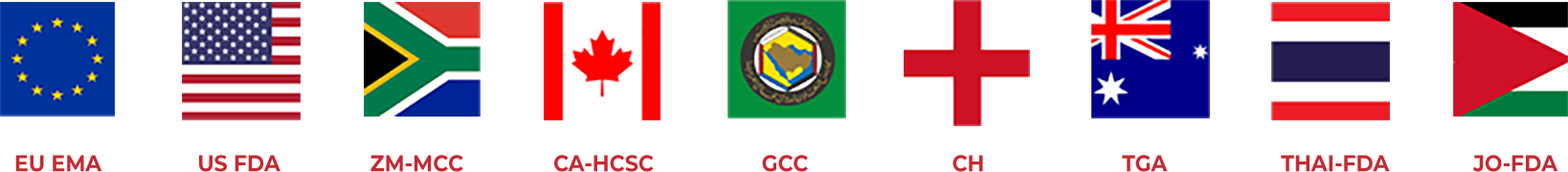
<style>
.page{position:relative;width:1568px;height:172px;background:#ffffff}
.page>*{position:absolute;margin:0}
.t1{font:23px "Montserrat-Bold";color:#c52a32;scale:0.92 1}
</style>
<div class="page">
<p class="t1" style="left:15px;top:155px;width:1543px;height:17px">EU EMA                US FDA               ZM-MCC               CA-HCSC                  GCC                        CH                       TGA                   THAI-FDA              JO-FDA</p>
</div>
